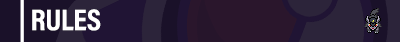
<style>
.page{position:relative;width:400px;height:42px;background:#2c243a}
.page>*{position:absolute;margin:0}
.t1{font:30px "AcuminProCond-Bold";color:#ffffff;text-transform:uppercase}
</style>
<div class="page">
<p class="t1" style="left:32px;top:9px;width:69px;height:22px">Rules</p>
</div>
